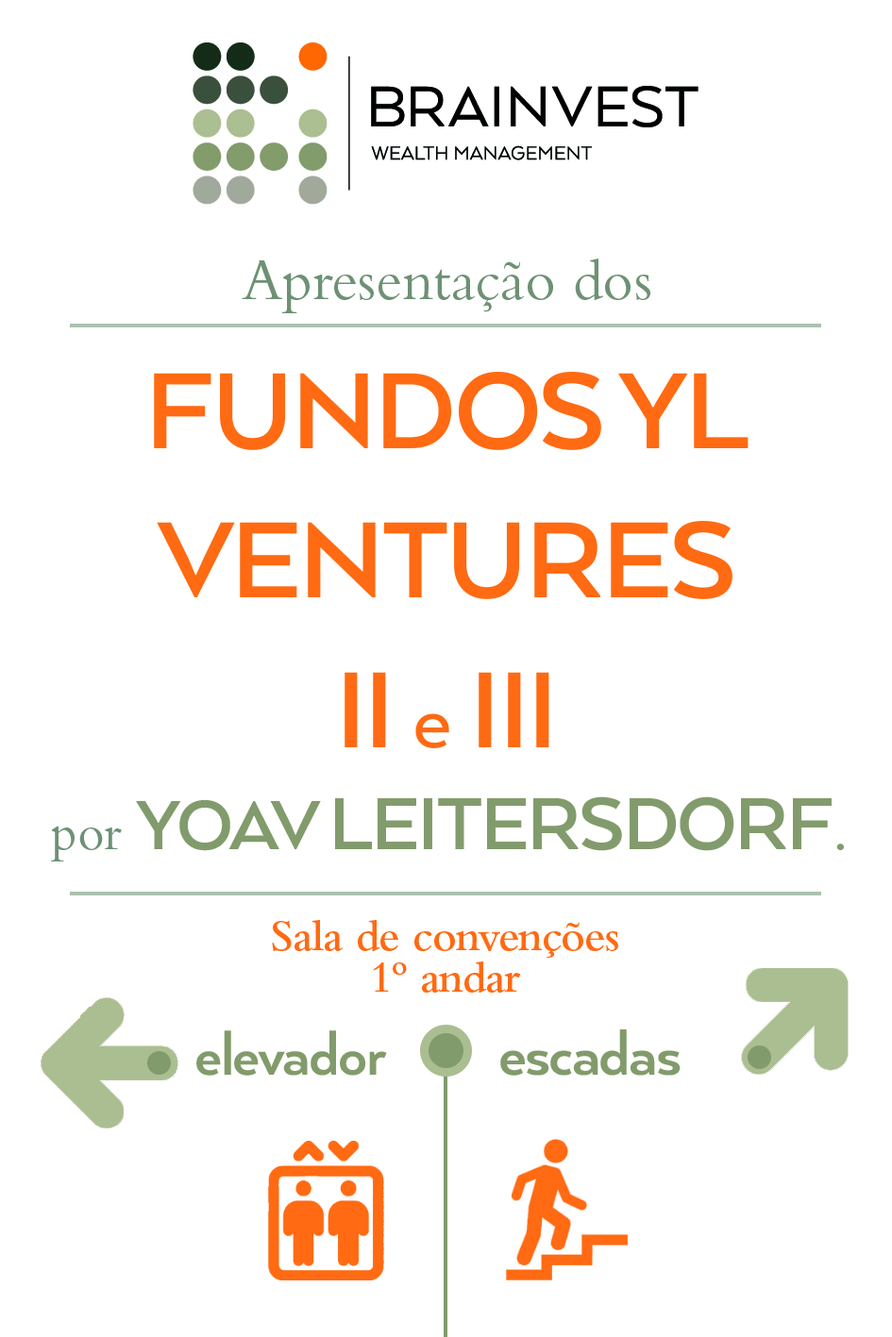
<style>
.page{position:relative;width:892px;height:1337px;background:#ffffff}
.page>*{position:absolute;margin:0}
.t1{font:124.5px "ArquitectaBold";letter-spacing:-0.025em;color:#ff6a12;text-transform:uppercase}
.t2{font:60px/75px "BemboStd";color:#6d9173}
.t3{font:94.4px "Arquitecta";letter-spacing:-0.025em;color:#ff6a12}
.t4{font:51.9px "BemboStd";color:#6d9173}
.t5{font:80.2px "ArquitectaBold";letter-spacing:-0.025em;color:#839c6c;text-transform:uppercase}
.t6{font:84.9px "ArquitectaBold";letter-spacing:-0.025em;color:#839c6c;text-transform:uppercase}
.t7{font:67.9px "BemboStd";color:#839c6c}
.t8{font:45.3px/41.5px "BemboStd-Semibold";letter-spacing:-0.025em;color:#ff6a12}
.t9{font:66.1px "ArquitectaBold";letter-spacing:-0.025em;color:#829b6b}
.t10{font:67.9px "ArquitectaBold";letter-spacing:-0.025em;color:#829b6b}
</style>
<div class="page">
<p class="t1" style="left:51px;top:259px;width:793px;height:603px;text-align:center"><span class="t2">Apresentação dos<br></span>FundoS YL <br>Ventures <br>II <span class="t3">e</span> III <br><span class="t4">por </span><span class="t5">Yoav </span><span class="t6">leitersdorf</span><span class="t7">.</span></p>
<p class="t8" style="left:272px;top:920px;width:346px;height:73px;text-align:center">Sala de convenções<br>1º andar</p>
<p class="t9" style="left:196px;top:1030px;width:191px;height:46px">elevador</p>
<p class="t10" style="left:500px;top:1030px;width:180px;height:46px">escadas</p>
</div>
